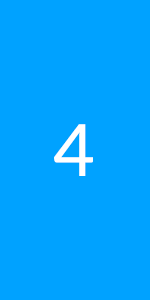
<style>
.page{position:relative;width:150px;height:300px;background:#00a2ff}
.page>*{position:absolute;margin:0}
.t1{font:72px "Lato-Regular";letter-spacing:0.3em;color:#ffffff}
</style>
<div class="page">
<p class="t1" style="left:54px;top:124px;width:39px;height:52px">4</p>
</div>
